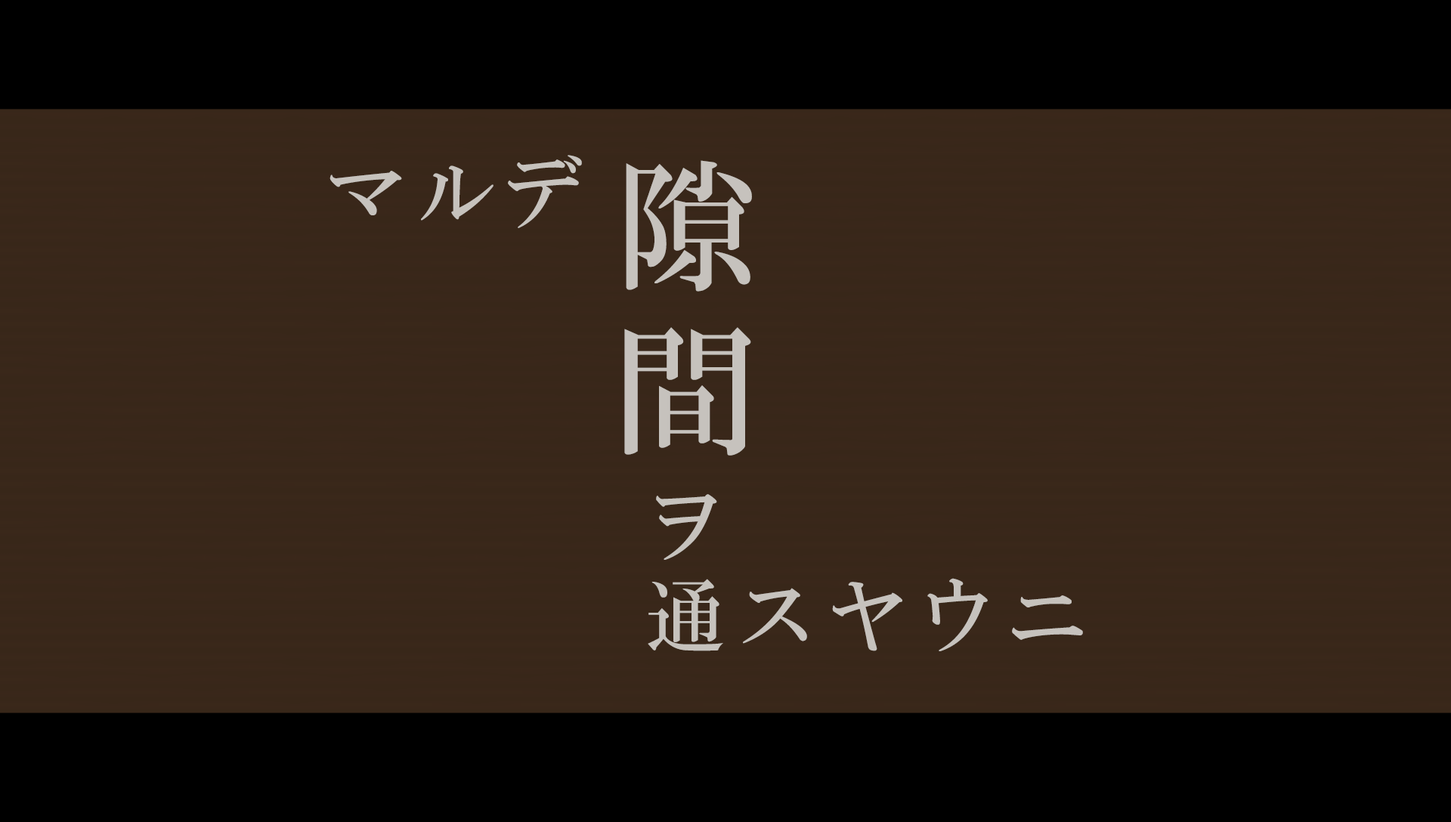
<style>
.page{position:relative;width:1451px;height:822px;background:#39271a}
.page>*{position:absolute;margin:0}
.t1{font:80.1px "HGMinchoB";letter-spacing:0.11em;color:#c6c2bd}
.t2{font:141.3px/113.3px "HGMinchoB";letter-spacing:0.17em;color:#c6c2bd}
.t3{font:80.1px/89.9px "HGMinchoB";letter-spacing:0.13em;color:#c6c2bd}
</style>
<div class="page">
<p class="t1" style="left:329px;top:155px;width:253px;height:73px">マルデ</p>
<p class="t2" style="left:624px;top:160px;width:128px;height:296px">隙間</p>
<p class="t3" style="left:647px;top:494px;width:436px;height:157px">ヲ<br>通スヤウニ</p>
</div>
